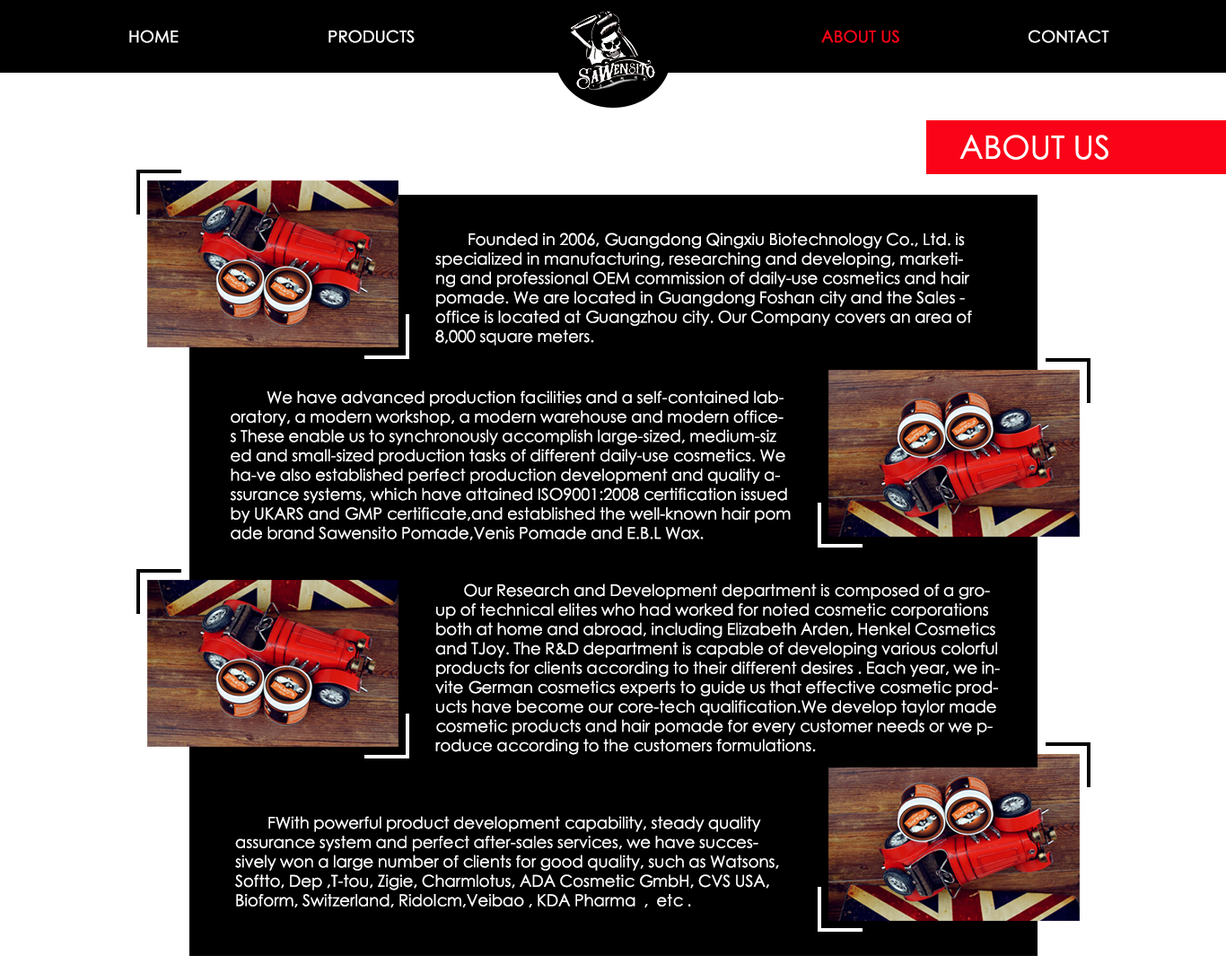
<style>
.page{position:relative;width:1226px;height:973px;background:#000000}
.page>*{position:absolute;margin:0}
.t1{font:16.2px "STXihei";color:#ffffff;font-weight:bold}
.t2{font:16.2px "STXihei";color:#fa0318;font-weight:bold}
.t3{font:32.3px "STXihei";color:#ffffff}
.t4{font:16.2px "STXihei";color:#ffffff}
</style>
<div class="page">
<p class="t1" style="left:129px;top:30px;width:50px;height:13px">HOME</p>
<p class="t1" style="left:328px;top:30px;width:87px;height:13px">PRODUCTS</p>
<p class="t2" style="left:821px;top:30px;width:78px;height:13px">ABOUT US</p>
<p class="t1" style="left:1028px;top:30px;width:81px;height:13px">CONTACT</p>
<p class="t3" style="left:959px;top:135px;width:149px;height:25px">ABOUT US</p>
<p class="t4" style="left:435px;top:232px;width:537px;height:113px">Founded in 2006, Guangdong Qingxiu Biotechnology Co., Ltd. is <br>specialized in manufacturing, researching and developing, marketi-<br>ng and professional OEM commission of daily-use cosmetics and hair <br>pomade. We are located in Guangdong Foshan city and the Sales -<br>office is located at Guangzhou city. Our Company covers an area of <br>8,000 square meters.</p>
<p class="t4" style="left:230px;top:390px;width:561px;height:150px">We have advanced production facilities and a self-contained lab-<br>oratory, a modern workshop, a modern warehouse and modern office-<br>s These enable us to synchronously accomplish large-sized, medium-siz<br>ed and small-sized production tasks of different daily-use cosmetics. We <br>ha-ve also established perfect production development and quality a-<br>ssurance systems, which have attained ISO9001:2008 certification issued <br>by UKARS and GMP certificate,and established the well-known hair pom<br>ade brand Sawensito Pomade,Venis Pomade and E.B.L Wax.</p>
<p class="t4" style="left:435px;top:583px;width:565px;height:172px">Our Research and Development department is composed of a gro-<br>up of technical elites who had worked for noted cosmetic corporations <br>both at home and abroad, including Elizabeth Arden, Henkel Cosmetics <br>and TJoy. The R&amp;D department is capable of developing various colorful <br>products for clients according to their different desires . Each year, we in-<br>vite German cosmetics experts to guide us that effective cosmetic prod-<br>ucts have become our core-tech qualification.We develop taylor made <br>cosmetic products and hair pomade for every customer needs or we p-<br>roduce according to the customers formulations.</p>
<p class="t4" style="left:235px;top:816px;width:544px;height:91px">FWith powerful product development capability, steady quality <br>assurance system and perfect after-sales services, we have succes-<br>sively won a large number of clients for good quality, such as Watsons, <br>Softto, Dep ,T-tou, Zigie, Charmlotus, ADA Cosmetic GmbH, CVS USA,  <br>Bioform, Switzerland, Ridolcm,Veibao , KDA Pharma  ,  etc .</p>
</div>
